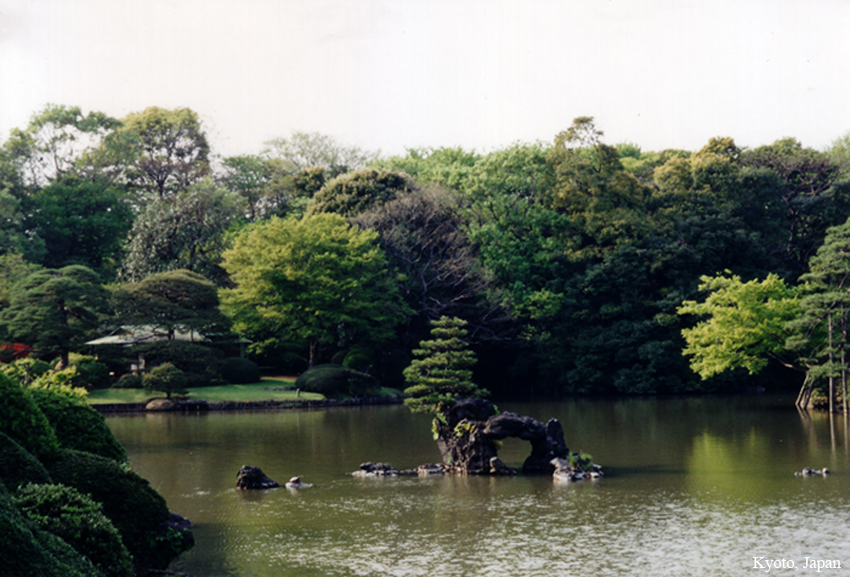
<style>
.page{position:relative;width:850px;height:577px}
.page>*{position:absolute;margin:0}
.t1{font:16.7px "TimesNewRomanPSMT";color:#ffffff}
</style>
<div class="page">
<p class="t1" style="left:753px;top:557px;width:88px;height:15px">Kyoto, Japan</p>
</div>
